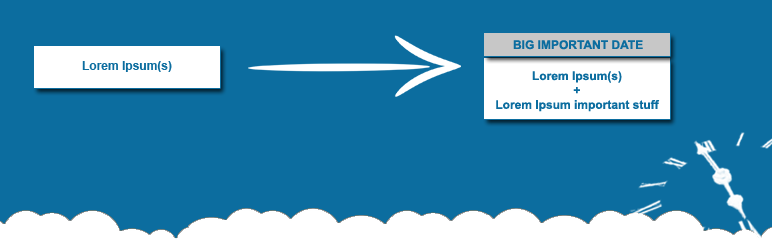
<style>
.page{position:relative;width:772px;height:250px;background:#0c6d9f}
.page>*{position:absolute;margin:0}
.t1{font:12px "Arial-BoldMT";color:#0c6d9f}
</style>
<div class="page">
<p class="t1" style="left:513px;top:40px;width:130px;height:10px">BIG IMPORTANT DATE</p>
<p class="t1" style="left:82px;top:61px;width:90px;height:11px">Lorem Ipsum(s)</p>
<p class="t1" style="left:496px;top:71px;width:164px;height:41px;text-align:center">Lorem Ipsum(s)<br>+<br>Lorem Ipsum important stuff</p>
</div>
